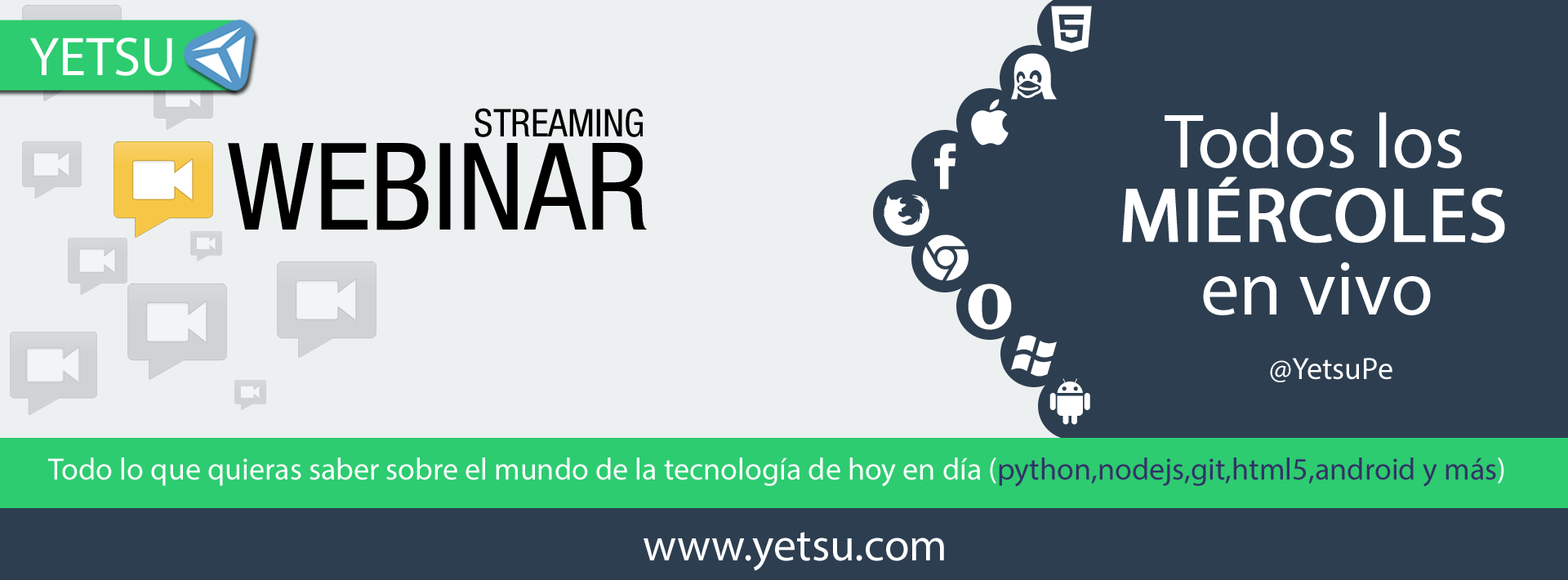
<style>
.page{position:relative;width:1568px;height:580px;background:#ecf0f1}
.page>*{position:absolute;margin:0}
.t1{font:54.7px "MyriadPro-Regular";color:#ffffff}
.t2{font:38.4px "HelveticaNeueLTStd-Cn";color:#000000}
.t3{font:77.6px/24.5px "MyriadPro-Regular";color:#ffffff}
.t4{font:77.6px/24.5px "MyriadPro-Regular";color:#ffffff;font-weight:bold}
.t5{font:120.9px "HelveticaNeueLTStd-Cn";color:#000000}
.t6{font:31px "MyriadPro-Regular";color:#ffffff}
.t7{font:31px "MyriadPro-Regular";color:#333366}
.t8{font:45.7px "MyriadPro-Regular";color:#ffffff}
</style>
<div class="page">
<p class="t1" style="left:29px;top:38px;width:143px;height:38px">YETSU</p>
<p class="t2" style="left:474px;top:108px;width:169px;height:29px">STREAMING</p>
<p class="t3" style="left:1122px;top:112px;width:383px;height:203px">Todos los <br>    <br><span class="t4"><br>MIÉRCOLES <br></span><br><br>     en vivo</p>
<p class="t5" style="left:228px;top:143px;width:420px;height:87px">WEBINAR</p>
<p class="t6" style="left:1270px;top:358px;width:122px;height:24px">@YetsuPe</p>
<p class="t6" style="left:48px;top:457px;width:1456px;height:30px">Todo lo que quieras saber sobre el mundo de la tecnología de hoy en día (<span class="t7">python,nodejs,git,html5,android y más</span>)</p>
<p class="t8" style="left:644px;top:532px;width:300px;height:39px">www.yetsu.com</p>
</div>
